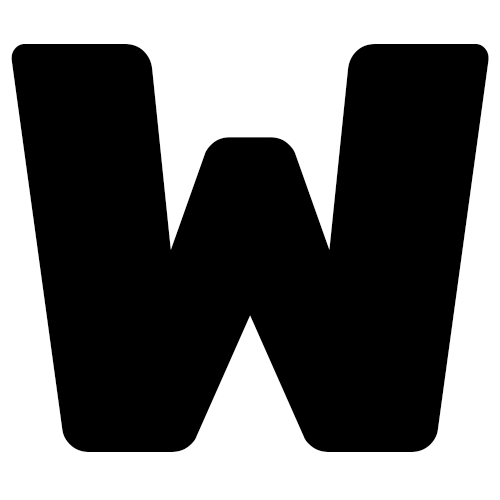
<style>
.page{position:relative;width:500px;height:500px;background:#000000}
.page>*{position:absolute;margin:0}
.t1{font:583.3px "RubikMonoOne-Regular";color:#000000}
</style>
<div class="page">
<p class="t1" style="left:11px;top:44px;width:478px;height:408px">W</p>
</div>
